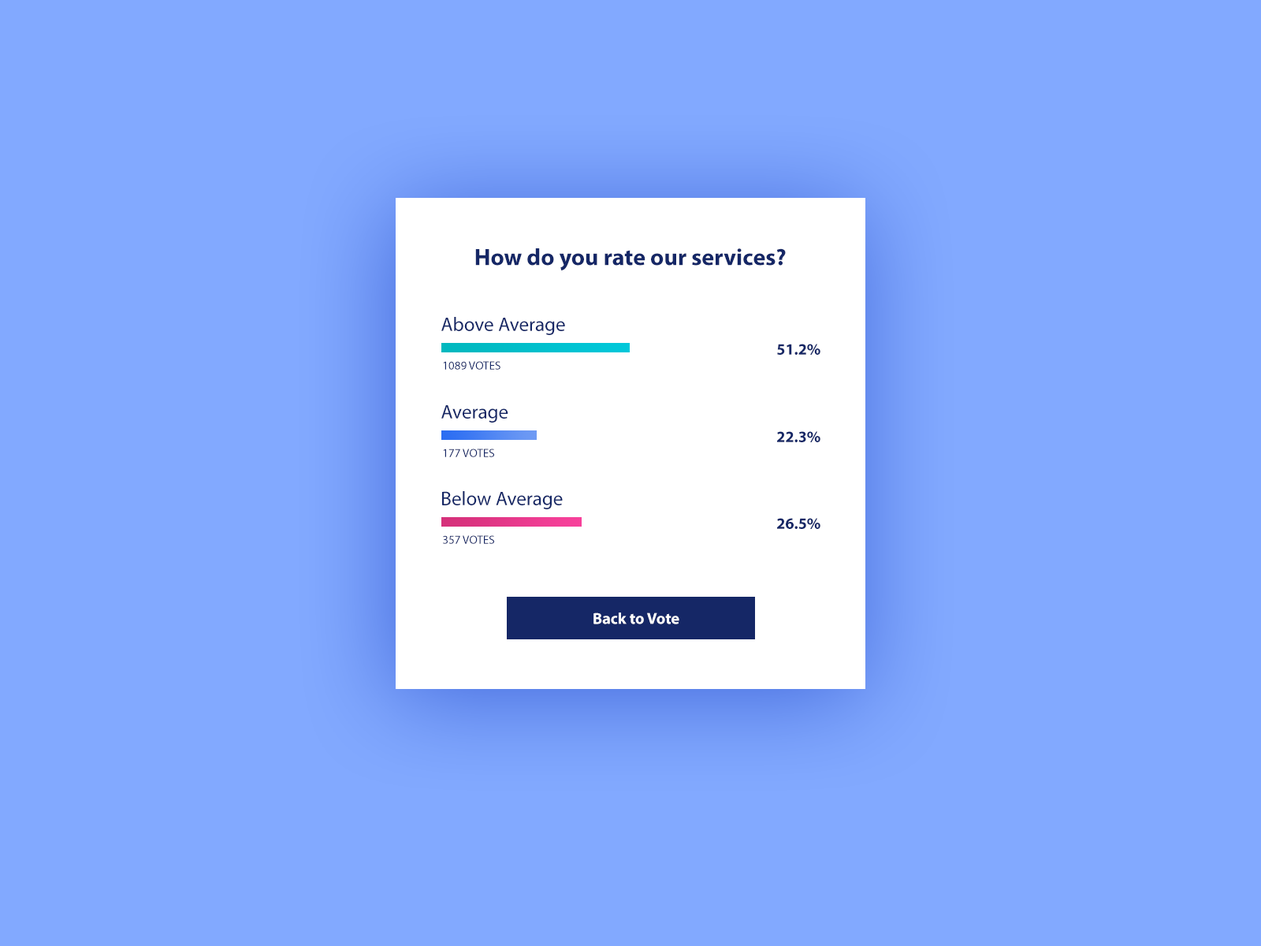
<style>
.page{position:relative;width:1261px;height:946px;background:#82a9ff}
.page>*{position:absolute;margin:0}
.t1{font:23.6px "MyriadPro-Bold";color:#152766}
.t2{font:19.7px "MyriadPro-Regular";color:#152766}
.t3{font:15.8px "MyriadPro-Bold";color:#152766}
.t4{font:11.8px "MyriadPro-Regular";color:#152766;text-transform:uppercase}
.t5{font:15.8px "MyriadPro-Bold";color:#ffffff}
</style>
<div class="page">
<p class="t1" style="left:475px;top:248px;width:311px;height:22px">How do you rate our services?</p>
<p class="t2" style="left:441px;top:317px;width:124px;height:18px">Above Average</p>
<p class="t3" style="left:777px;top:344px;width:43px;height:11px">51.2%</p>
<p class="t4" style="left:443px;top:361px;width:57px;height:9px">1089 votes</p>
<p class="t2" style="left:441px;top:405px;width:67px;height:17px">Average</p>
<p class="t3" style="left:777px;top:431px;width:43px;height:11px">22.3%</p>
<p class="t4" style="left:443px;top:448px;width:51px;height:9px">177 votes</p>
<p class="t2" style="left:442px;top:491px;width:121px;height:18px">Below Average</p>
<p class="t3" style="left:777px;top:518px;width:43px;height:11px">26.5%</p>
<p class="t4" style="left:443px;top:535px;width:51px;height:9px">357 votes</p>
<p class="t5" style="left:593px;top:612px;width:86px;height:12px">Back to Vote</p>
</div>
